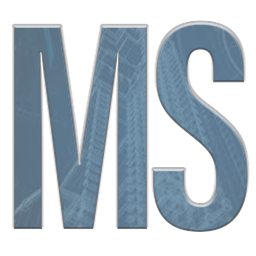
<style>
.page{position:relative;width:256px;height:256px;background:#ffffff}
.page>*{position:absolute;margin:0}
.t1{font:304px "AcuminConcept-ExtraCondensedBold";letter-spacing:-0.04em;color:#637e94;font-weight:bold}
</style>
<div class="page">
<p class="t1" style="left:13px;top:22px;width:235px;height:210px">MS</p>
</div>
